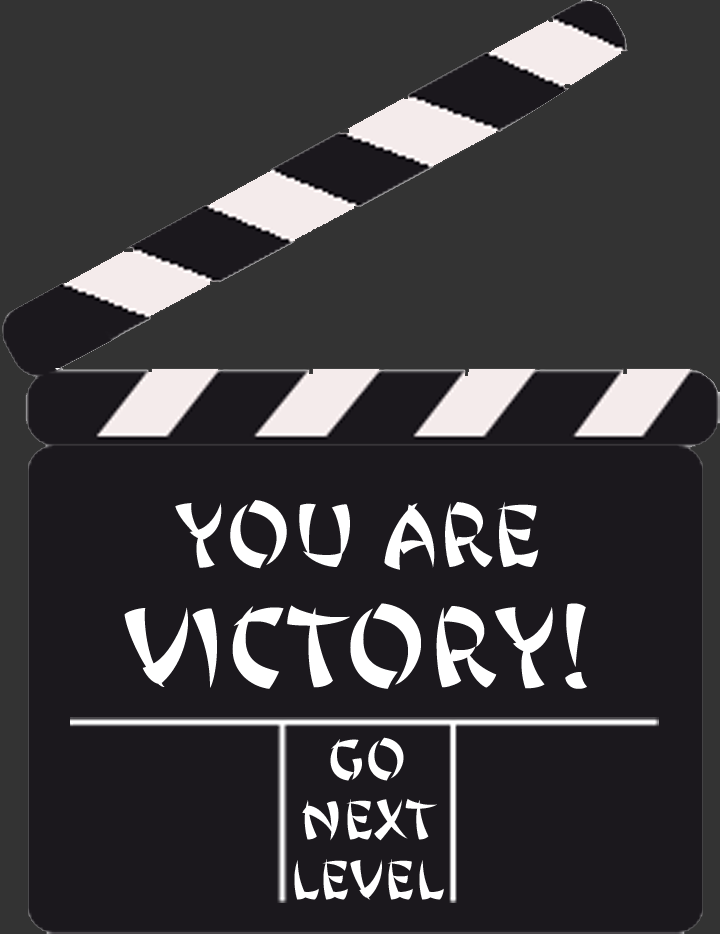
<style>
.page{position:relative;width:720px;height:934px;background:#1b181d}
.page>*{position:absolute;margin:0}
.t1{font:100px "JingJing";color:#ffffff}
.t2{font:80px "JingJing";color:#ffffff}
.t3{font:50px "JingJing";color:#ffffff}
</style>
<div class="page">
<p class="t1" style="left:124px;top:500px;width:463px;height:189px;text-align:center"><span class="t2">YOU ARE<br></span>VICTORY!</p>
<p class="t3" style="left:294px;top:737px;width:150px;height:163px;text-align:center">Go Next Level</p>
</div>
